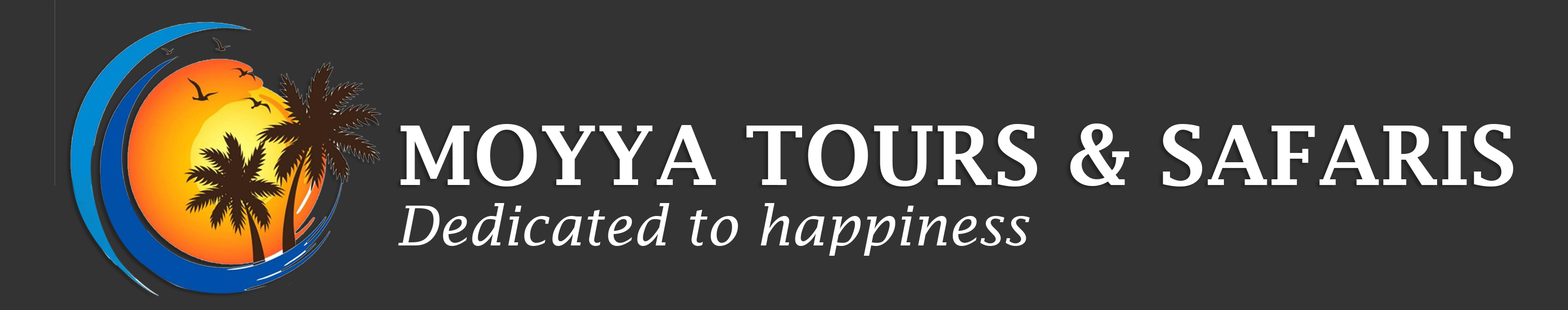
<style>
.page{position:relative;width:1568px;height:310px;background:#333333}
.page>*{position:absolute;margin:0}
.t1{font:82.2px "LucidaFax-Demi";color:#ffffff}
.t2{font:54.8px "LucidaFax-Italic";color:#ffffff}
</style>
<div class="page">
<p class="t1" style="left:401px;top:124px;width:1113px;height:63px">MOYYA TOURS &amp; SAFARIS</p>
<p class="t2" style="left:398px;top:203px;width:632px;height:53px">Dedicated to happiness</p>
</div>
